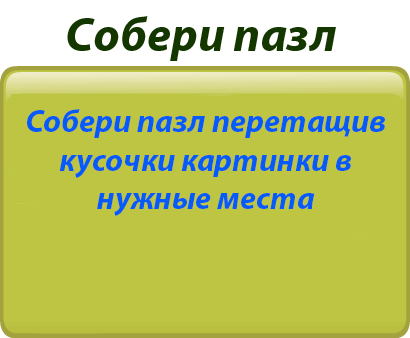
<style>
.page{position:relative;width:410px;height:338px;background:#bdc542}
.page>*{position:absolute;margin:0}
.t1{font:48px "MyriadPro-BoldIt";color:#143700}
.t2{font:32px "MyriadPro-BoldIt";color:#055af9}
</style>
<div class="page">
<p class="t1" style="left:67px;top:16px;width:269px;height:45px">Собери пазл</p>
<p class="t2" style="left:27px;top:109px;width:358px;height:107px;text-align:center">Собери пазл перетащив кусочки картинки в нужные места</p>
</div>
